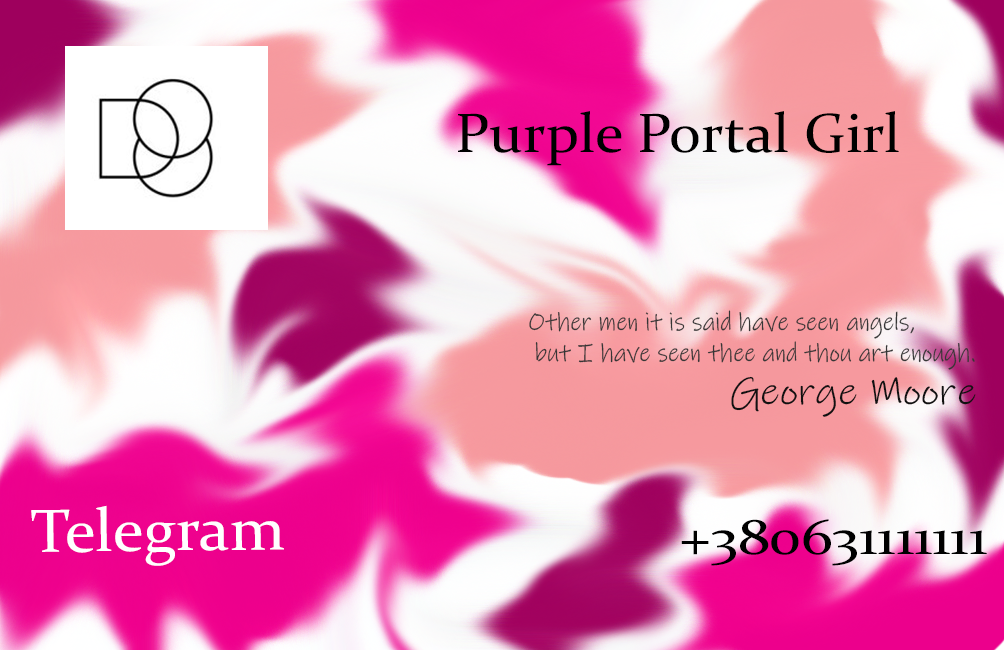
<style>
.page{position:relative;width:1004px;height:650px}
.page>*{position:absolute;margin:0}
.t1{font:55.8px "Constantia";color:#000000;scale:1.06 1}
.t2{font:25.7px "InkFree";color:#363636;scale:0.93 1}
.t3{font:38.8px "InkFree";color:#111111;scale:1.08 1}
.t4{font:61.2px "Constantia";color:#ffffff;scale:1.04 1}
.t5{font:51.2px "Constantia";color:#000000;scale:1.14 1}
</style>
<div class="page">
<p class="t1" style="left:458px;top:111px;width:441px;height:55px">Purple Portal Girl</p>
<p class="t2" style="left:529px;top:310px;width:446px;height:60px">Other men it is said have seen angels,<br> but I have seen thee and thou art enough.</p>
<p class="t3" style="left:731px;top:376px;width:245px;height:41px">George Moore</p>
<p class="t4" style="left:31px;top:505px;width:253px;height:61px;rotate:-1deg">Telegram</p>
<p class="t5" style="left:681px;top:519px;width:306px;height:47px">+380631111111</p>
</div>
